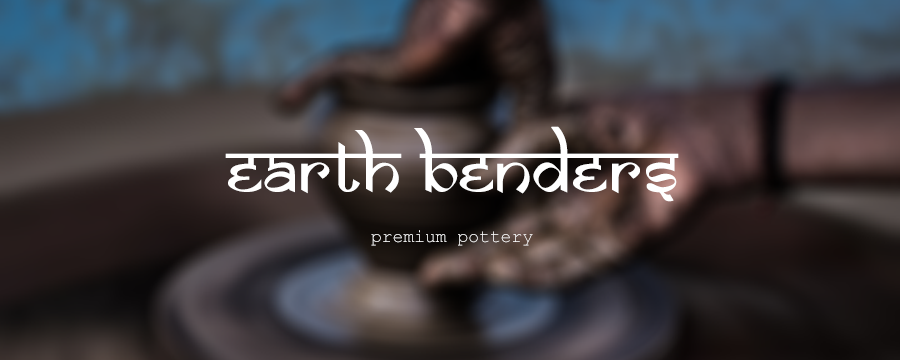
<style>
.page{position:relative;width:900px;height:360px}
.page>*{position:absolute;margin:0}
.t1{font:72px "SamarkanNormal";color:#ffffff}
.t2{font:18px "CourierNewPSMT";color:#ffffff}
</style>
<div class="page">
<p class="t1" style="left:225px;top:126px;width:454px;height:76px">earth benders</p>
<p class="t2" style="left:371px;top:230px;width:162px;height:16px">premium pottery</p>
</div>
